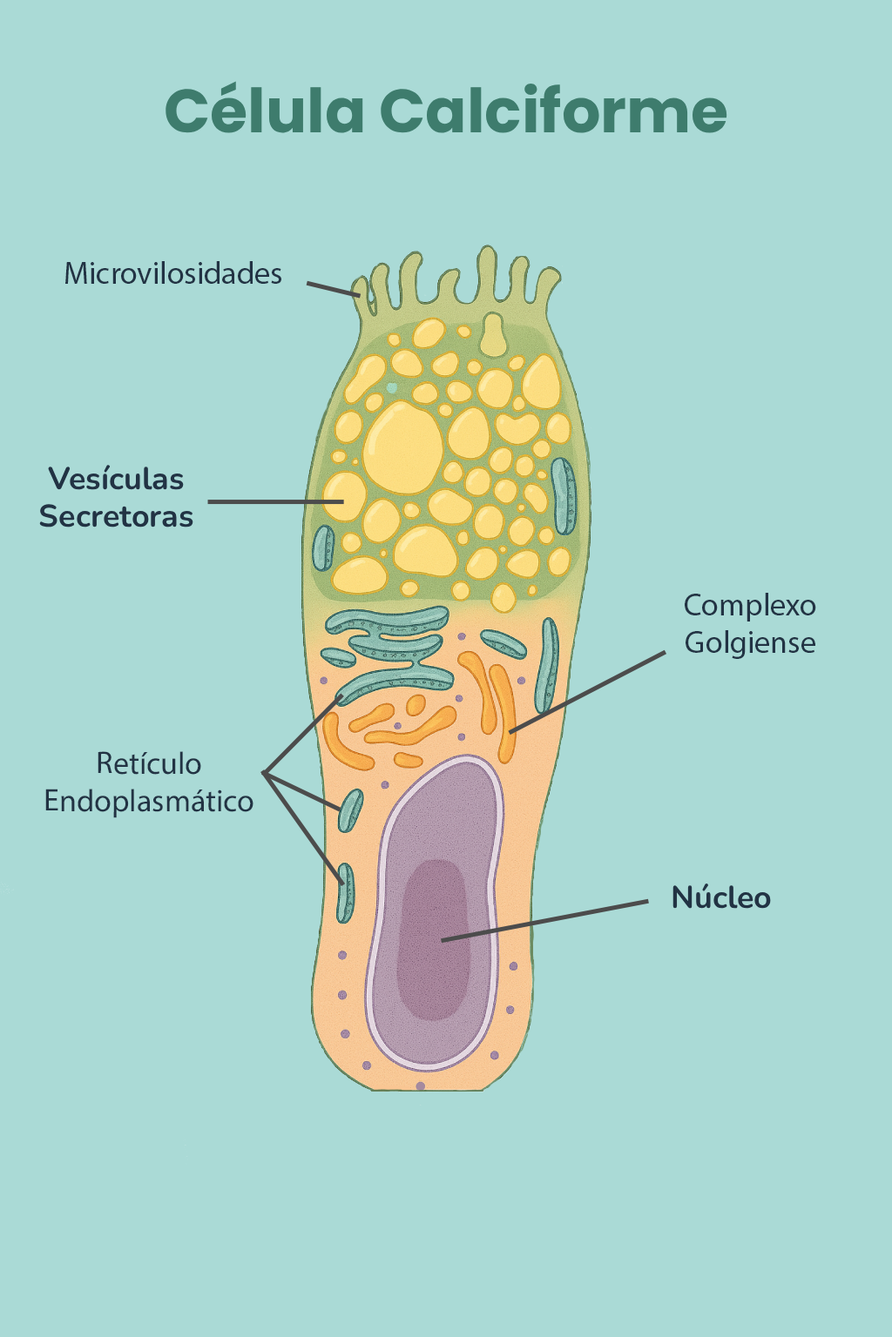
<style>
.page{position:relative;width:892px;height:1337px;background:#aadad6}
.page>*{position:absolute;margin:0}
.t1{font:60.9px "Poppins-Bold";color:#3e7c6d}
.t2{font:31.3px "MyriadPro-Regular";color:#223344}
.t3{font:31.3px "Nunito-Bold";color:#223344}
</style>
<div class="page">
<p class="t1" style="left:165px;top:81px;width:562px;height:52px">Célula Calciforme</p>
<p class="t2" style="left:65px;top:261px;width:216px;height:23px">Microvilosidades</p>
<p class="t3" style="left:39px;top:465px;width:154px;height:63px;text-align:center">Vesículas Secretoras</p>
<p class="t2" style="left:684px;top:593px;width:132px;height:66px;text-align:center">Complexo <br>Golgiense</p>
<p class="t2" style="left:45px;top:751px;width:208px;height:67px;text-align:center">Retículo Endoplasmático</p>
<p class="t3" style="left:672px;top:883px;width:99px;height:26px">Núcleo</p>
</div>
